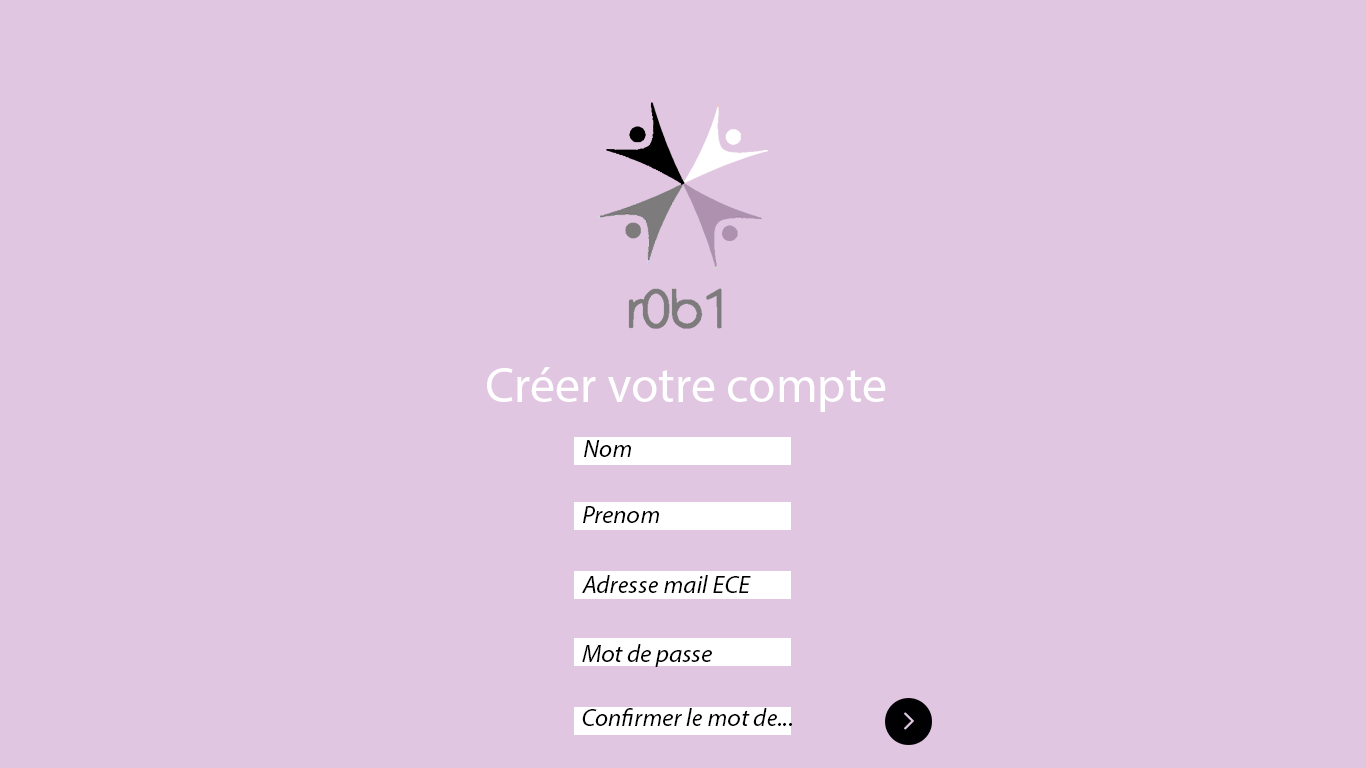
<style>
.page{position:relative;width:1366px;height:768px;background:#e0c6e1}
.page>*{position:absolute;margin:0}
.t1{font:12px "MyriadPro-Regular";color:#ffffff}
.t2{font:25px "MyriadPro-It";color:#000000}
</style>
<div class="page">
<p class="t1" style="left:487px;top:367px;width:399px;height:45px">Créer votre compte</p>
<p class="t2" style="left:584px;top:440px;width:47px;height:17px">Nom</p>
<p class="t2" style="left:583px;top:506px;width:76px;height:17px">Prenom</p>
<p class="t2" style="left:582px;top:575px;width:169px;height:18px">Adresse mail ECE</p>
<p class="t2" style="left:582px;top:644px;width:130px;height:23px">Mot de passe</p>
<p class="t2" style="left:582px;top:708px;width:210px;height:18px">Confirmer le mot de...</p>
</div>
